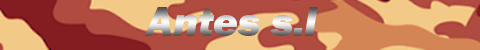
<style>
.page{position:relative;width:480px;height:50px;background:#b04b40}
.page>*{position:absolute;margin:0}
.t1{font:42.5px "FranklinGothic-HeavyItalic"}
</style>
<div class="page">
<p class="t1" style="left:144px;top:7px;width:174px;height:29px">Antes s.I</p>
</div>
